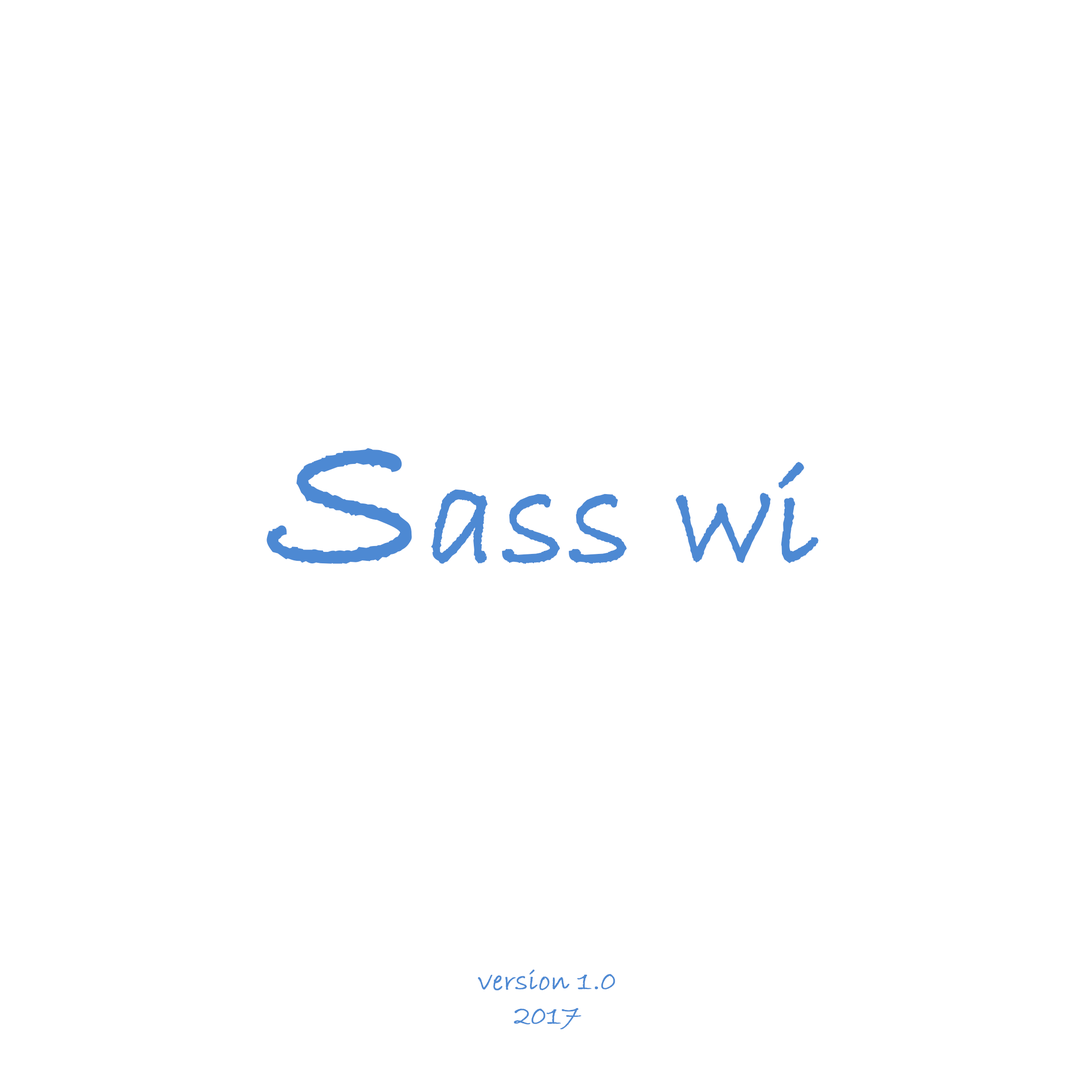
<style>
.page{position:relative;width:1092px;height:1092px;background:#ffffff}
.page>*{position:absolute;margin:0}
.t1{font:144.2px "BradleyHandITC";color:#4d89d3;font-weight:bold}
.t2{font:210.2px "BradleyHandITC";color:#4d89d3;font-weight:bold}
.t3{font:28.8px "BradleyHandITC";color:#4d89d3;font-weight:bold}
</style>
<div class="page">
<p class="t1" style="left:267px;top:448px;width:551px;height:116px"><span class="t2">S</span>ass wi</p>
<p class="t3" style="left:478px;top:969px;width:137px;height:60px;text-align:center">version 1.0<br>2017</p>
</div>
